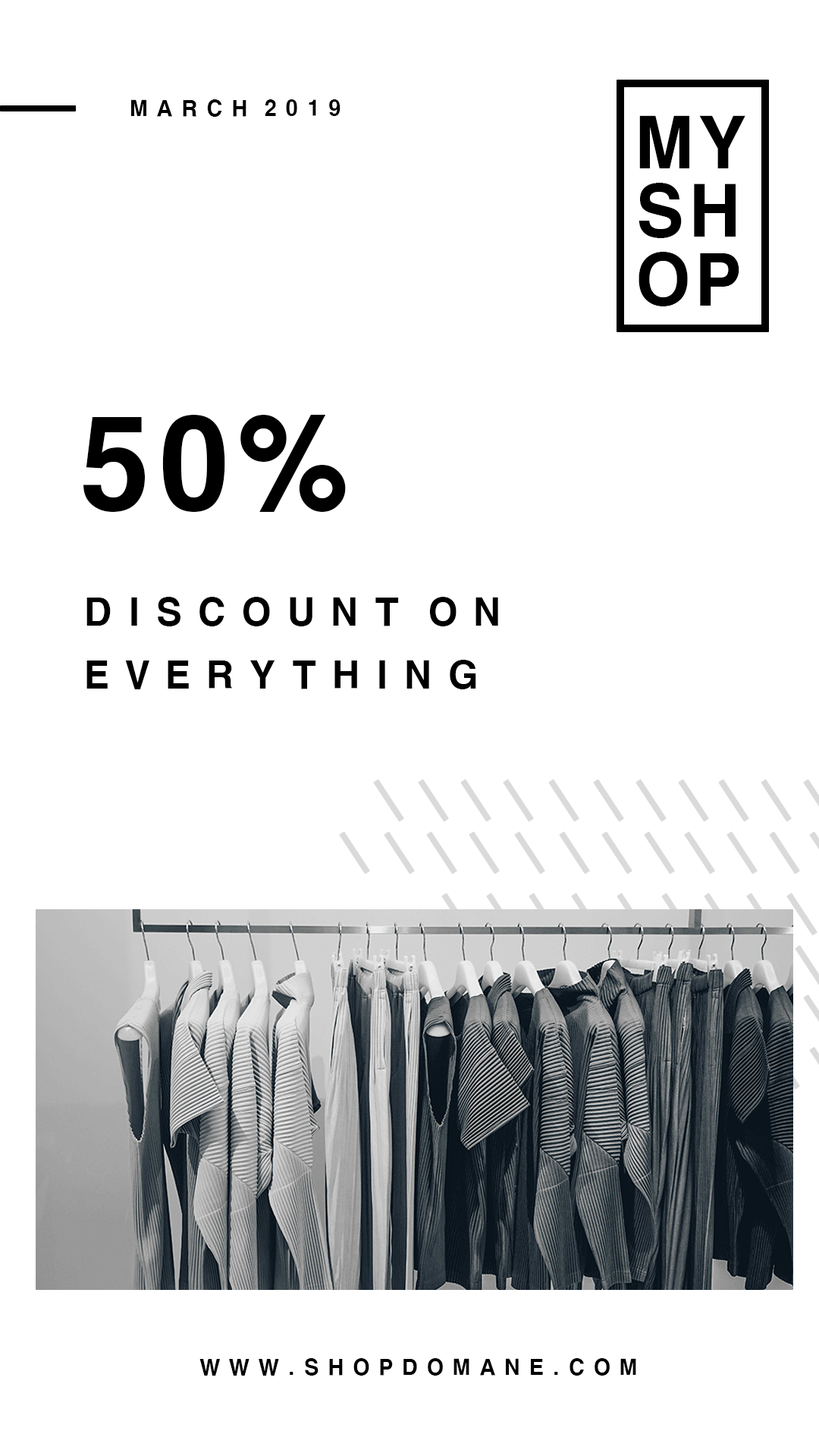
<style>
.page{position:relative;width:819px;height:1456px;background:#ffffff}
.page>*{position:absolute;margin:0}
.t1{font:21.1px "H2gtrE";letter-spacing:0.03em;color:#000000}
.t2{font:68.5px/68.5px "H2gtrE";letter-spacing:0.03em;color:#000000}
.t3{font:121.1px "H2gtrE";letter-spacing:0.03em;color:#000000}
.t4{font:36.9px/63.2px "H2gtrE";letter-spacing:0.03em;color:#000000}
</style>
<div class="page">
<p class="t1" style="left:131px;top:99px;width:209px;height:18px">M A R C H  2 0 1 9</p>
<p class="t2" style="left:639px;top:115px;width:106px;height:191px">MY<br>SH<br>OP</p>
<p class="t3" style="left:83px;top:414px;width:263px;height:98px">50%</p>
<p class="t4" style="left:86px;top:597px;width:412px;height:92px">D I S C O U N T  O N<br>E V E R Y T H I N G</p>
<p class="t1" style="left:199px;top:1358px;width:437px;height:18px">W W W . S H O P D O M A N E . C O M</p>
</div>
